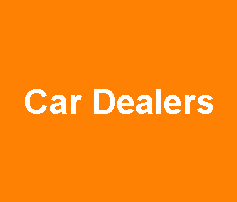
<style>
.page{position:relative;width:237px;height:202px;background:#fe8103}
.page>*{position:absolute;margin:0}
.t1{font:34px "Arial-BoldMT";color:#ffffff}
</style>
<div class="page">
<p class="t1" style="left:25px;top:89px;width:188px;height:25px">Car Dealers</p>
</div>
